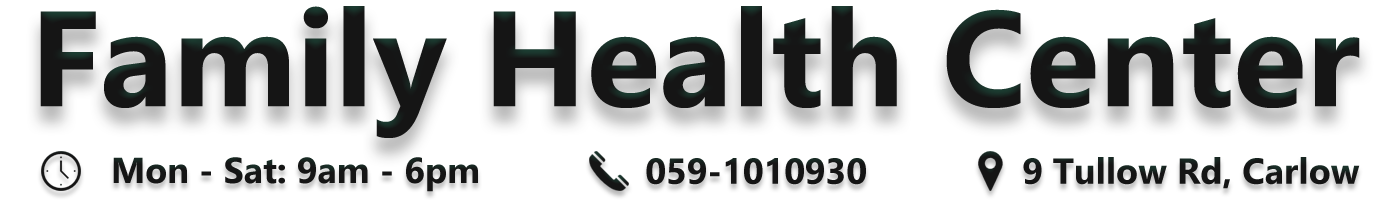
<style>
.page{position:relative;width:1400px;height:200px;background:#ffffff}
.page>*{position:absolute;margin:0}
.t1{font:135px "Gadugi-Bold";color:#151515}
.t2{font:36px "Gadugi-Bold";color:#151515}
</style>
<div class="page">
<p class="t1" style="left:40px;top:6px;width:1320px;height:132px">Family Health Center</p>
<p class="t2" style="left:113px;top:157px;width:365px;height:35px">Mon - Sat: 9am - 6pm</p>
<p class="t2" style="left:646px;top:158px;width:220px;height:27px">059-1010930</p>
<p class="t2" style="left:1023px;top:157px;width:337px;height:32px">9 Tullow Rd, Carlow</p>
</div>
